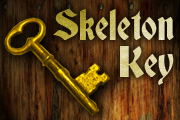
<style>
.page{position:relative;width:180px;height:120px}
.page>*{position:absolute;margin:0}
.t1{font:39.9px/36.8px "Deutsch-Gothic"}
</style>
<div class="page">
<p class="t1" style="left:53px;top:9px;width:121px;height:76px;text-align:right">Skeleton<br>Key</p>
</div>
